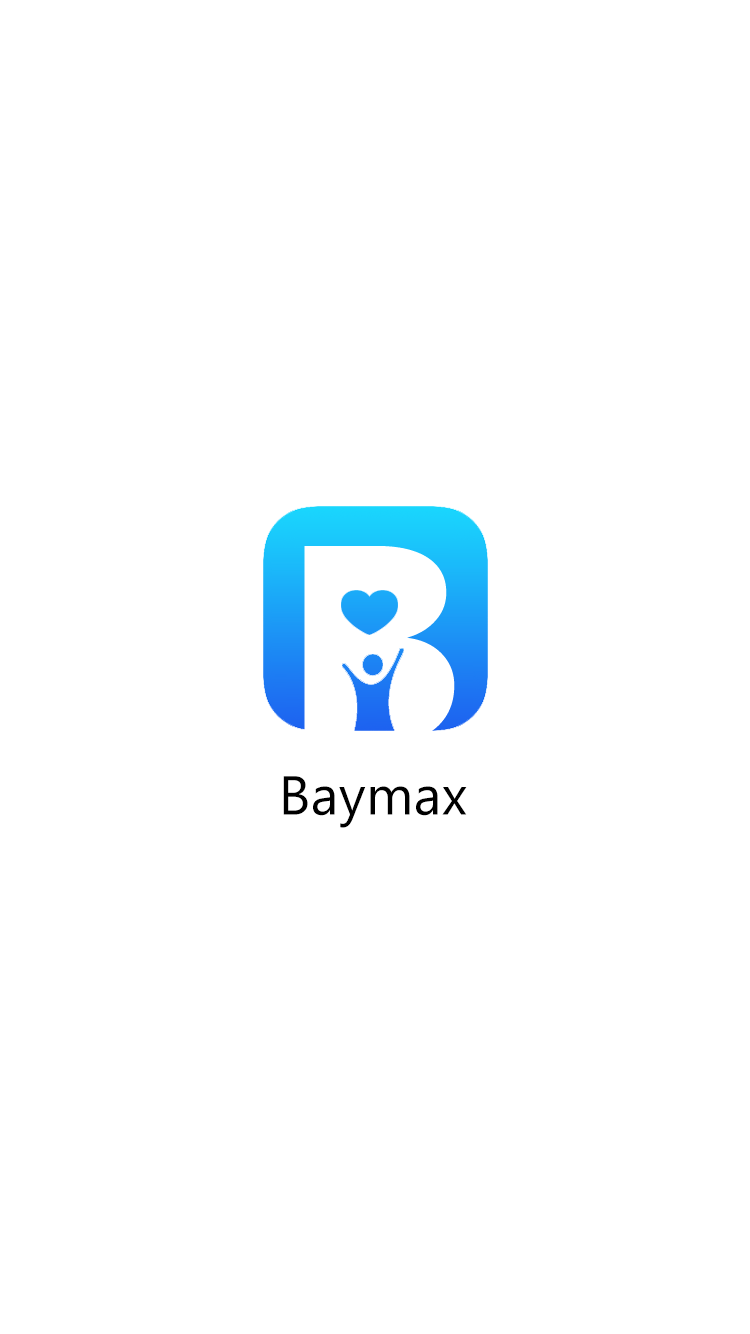
<style>
.page{position:relative;width:750px;height:1334px;background:#ffffff}
.page>*{position:absolute;margin:0}
.t1{font:54.6px "Ebrima";letter-spacing:0.01em;color:#000000}
</style>
<div class="page">
<p class="t1" style="left:283px;top:776px;width:184px;height:52px">Baymax</p>
</div>
